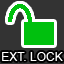
<style>
.page{position:relative;width:64px;height:64px;background:#333333}
.page>*{position:absolute;margin:0}
.t1{font:12px "ArialMT";color:#ffffff}
</style>
<div class="page">
<p class="t1" style="left:2px;top:52px;width:61px;height:9px">EXT. LOCK</p>
</div>
